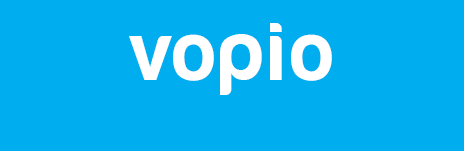
<style>
.page{position:relative;width:464px;height:151px;background:#00aeef}
.page>*{position:absolute;margin:0}
.t1{font:85.3px "Harabara";color:#ffffff}
</style>
<div class="page">
<p class="t1" style="left:270px;top:23px;width:12px;height:57px">i</p>
<p class="t1" style="left:129px;top:34px;width:85px;height:47px">vo</p>
<p class="t1" style="left:220px;top:34px;width:42px;height:61px">p</p>
<p class="t1" style="left:291px;top:34px;width:41px;height:47px">o</p>
</div>
